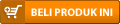
<style>
.page{position:relative;width:120px;height:24px;background:#ff8a00}
.page>*{position:absolute;margin:0}
.t1{font:11px "MyriadPro-Bold";color:#ffffff;text-transform:uppercase}
</style>
<div class="page">
<p class="t1" style="left:31px;top:8px;width:82px;height:8px">beli produk ini</p>
</div>
